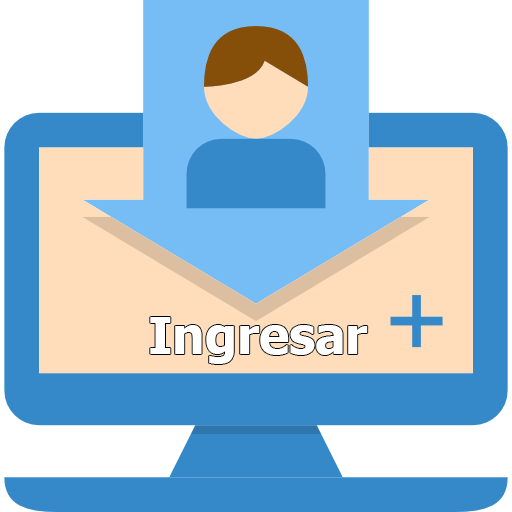
<style>
.page{position:relative;width:512px;height:512px;background:#3689c9}
.page>*{position:absolute;margin:0}
.t1{font:38.4px "Tahoma-Bold";color:#ffffff}
</style>
<div class="page">
<p class="t1" style="left:150px;top:317px;width:218px;height:47px">Ingresar</p>
</div>
